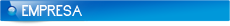
<style>
.page{position:relative;width:230px;height:26px}
.page>*{position:absolute;margin:0}
.t1{font:14px "Brassfield";color:#ffffff}
</style>
<div class="page">
<p class="t1" style="left:22px;top:5px;width:60px;height:11px">EMPRESA</p>
</div>
